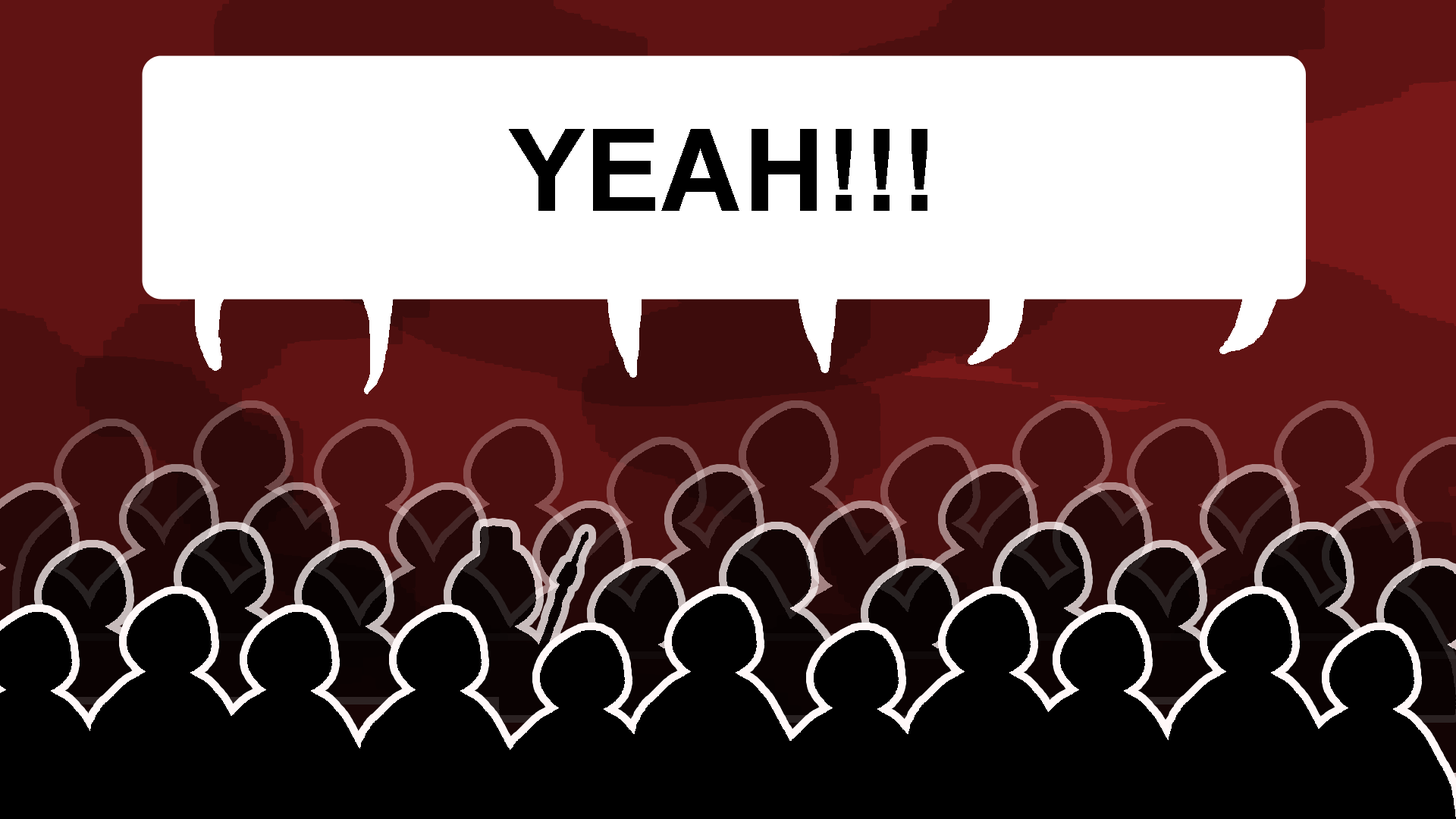
<style>
.page{position:relative;width:1456px;height:819px;background:#ffffff}
.page>*{position:absolute;margin:0}
.t1{font:113.7px "Arial-BoldMT";color:#000000}
</style>
<div class="page">
<p class="t1" style="left:509px;top:129px;width:418px;height:82px">YEAH!!!</p>
</div>
